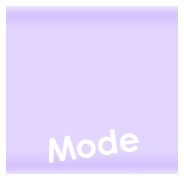
<style>
.page{position:relative;width:184px;height:180px;background:#e2d6ff}
.page>*{position:absolute;margin:0}
.t1{font:33.3px "CenturyGothic-Bold";color:#ffffff}
</style>
<div class="page">
<p class="t1" style="left:49px;top:129px;width:90px;height:34px;rotate:-8deg">Mode</p>
</div>
